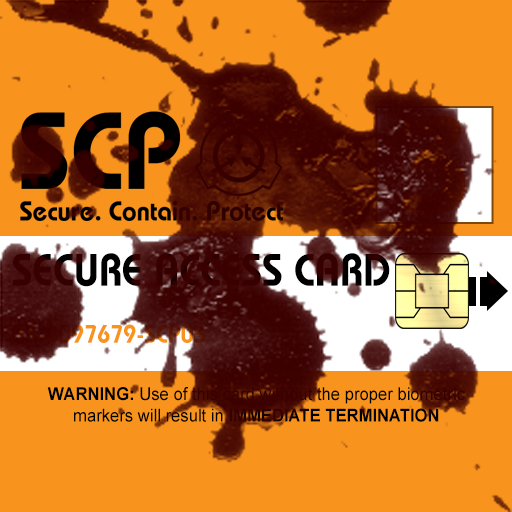
<style>
.page{position:relative;width:512px;height:512px;background:#f8941d}
.page>*{position:absolute;margin:0}
.t1{font:138.7px "BauhausLT-Demi";color:#410501;scale:0.95 1}
.t2{font:45.5px "BauhausLT-Demi";text-transform:uppercase;scale:0.91 1}
.t3{font:25.5px "BauhausLT-Demi";scale:0.92 1}
.t4{font:17.8px "ArialMT";color:#000000;scale:0.93 1}
.t5{font:17.8px "Arial-BoldMT";color:#000000;scale:0.93 1}
</style>
<div class="page">
<p class="t1" style="left:402px;top:116px;width:64px;height:98px">3</p>
<p class="t2" style="left:13px;top:253px;width:377px;height:34px">Secure Access Card</p>
<p class="t3" style="left:11px;top:324px;width:195px;height:19px">03-0097679-SCP03</p>
<p class="t4" style="left:47px;top:387px;width:418px;height:35px;text-align:center"><span class="t5">WARNING: </span>Use of this card without the proper biometric<br>markers will result in <span class="t5">IMMEDIATE TERMINATION</span></p>
</div>
